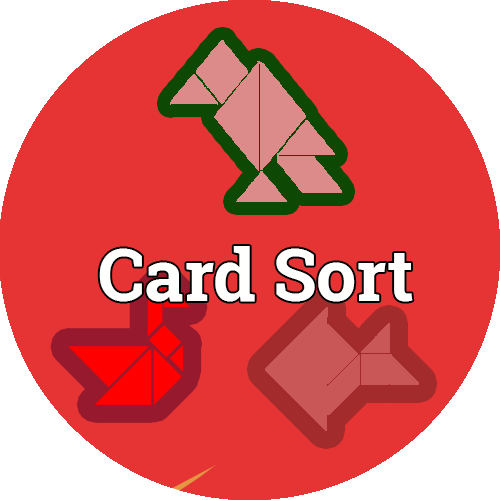
<style>
.page{position:relative;width:500px;height:500px;background:#e63333}
.page>*{position:absolute;margin:0}
.t1{font:71.5px "RobotoSlab-Bold";color:#fffffe}
</style>
<div class="page">
<p class="t1" style="left:99px;top:246px;width:314px;height:56px">Card Sort</p>
</div>
